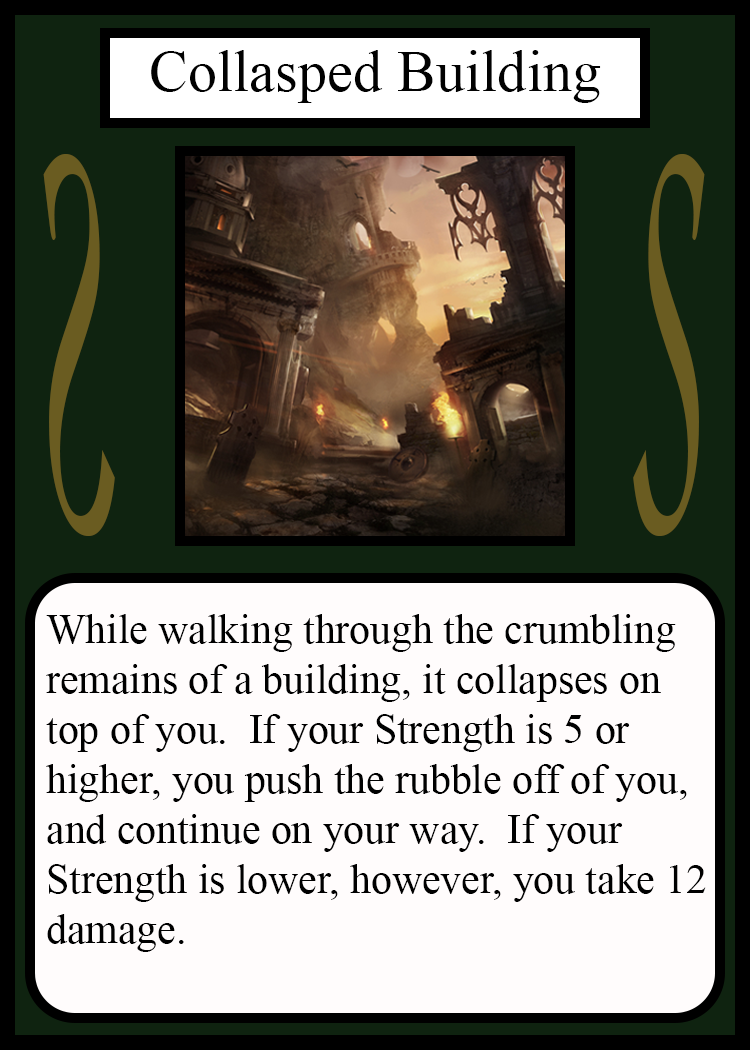
<style>
.page{position:relative;width:750px;height:1050px;background:#fffcfc}
.page>*{position:absolute;margin:0}
.t1{font:58.3px "TimesNewRomanPSMT";color:#010101}
.t2{font:548.5px "Apple-Chancery";color:#6a5c21;scale:0.27 1}
.t3{font:548.2px "Apple-Chancery";color:#6a5c21;scale:0.27 1}
.t4{font:41.7px "TimesNewRomanPSMT";color:#000000}
</style>
<div class="page">
<p class="t1" style="left:151px;top:50px;width:450px;height:53px">Collasped Building</p>
<p class="t2" style="left:43px;top:154px;width:72px;height:382px;rotate:180deg">S</p>
<p class="t3" style="left:633px;top:154px;width:72px;height:382px">S</p>
<p class="t4" style="left:46px;top:614px;width:660px;height:338px">While walking through the crumbling<br>remains of a building, it collapses on<br>top of you.  If your Strength is 5 or <br>higher, you push the rubble off of you, <br>and continue on your way.  If your<br>Strength is lower, however, you take 12<br>damage.</p>
</div>
